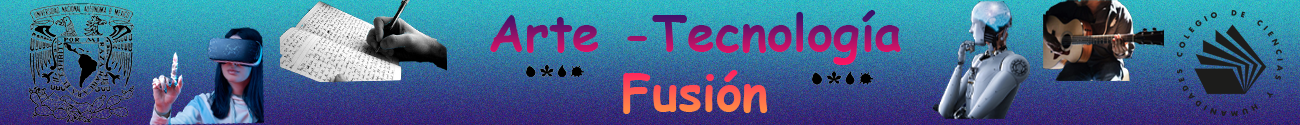
<style>
.page{position:relative;width:1300px;height:125px}
.page>*{position:absolute;margin:0}
.t1{font:50px "ComicSansMS-Bold"}
</style>
<div class="page">
<p class="t1" style="left:490px;top:10px;width:411px;height:104px;text-align:center">Arte -Tecnología<br>Fusión</p>
</div>
